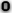
<style>
.page{position:relative;width:12px;height:13px}
.page>*{position:absolute;margin:0}
.t1{font:13.9px "K2D-ExtraBold";color:#000000}
</style>
<div class="page">
<p class="t1" style="left:1px;top:1px;width:9px;height:11px">0</p>
</div>
